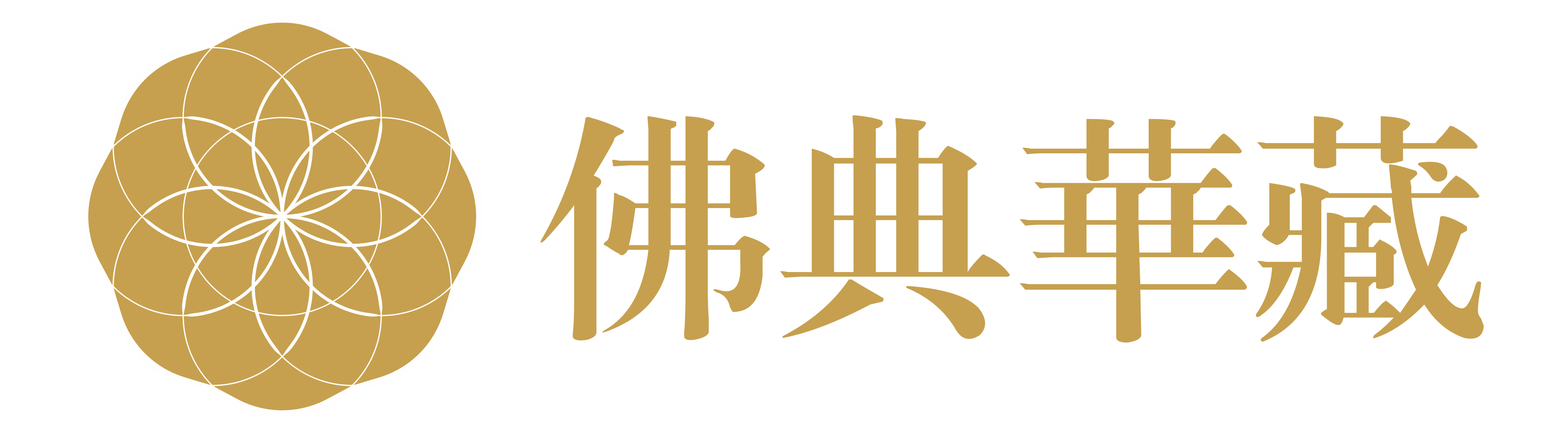
<style>
.page{position:relative;width:1568px;height:432px;background:#ffffff}
.page>*{position:absolute;margin:0}
.t1{font:237.5px "FZXBSFW--GB1-0";color:#c6a04f}
</style>
<div class="page">
<p class="t1" style="left:540px;top:115px;width:944px;height:228px">佛典华藏</p>
</div>
